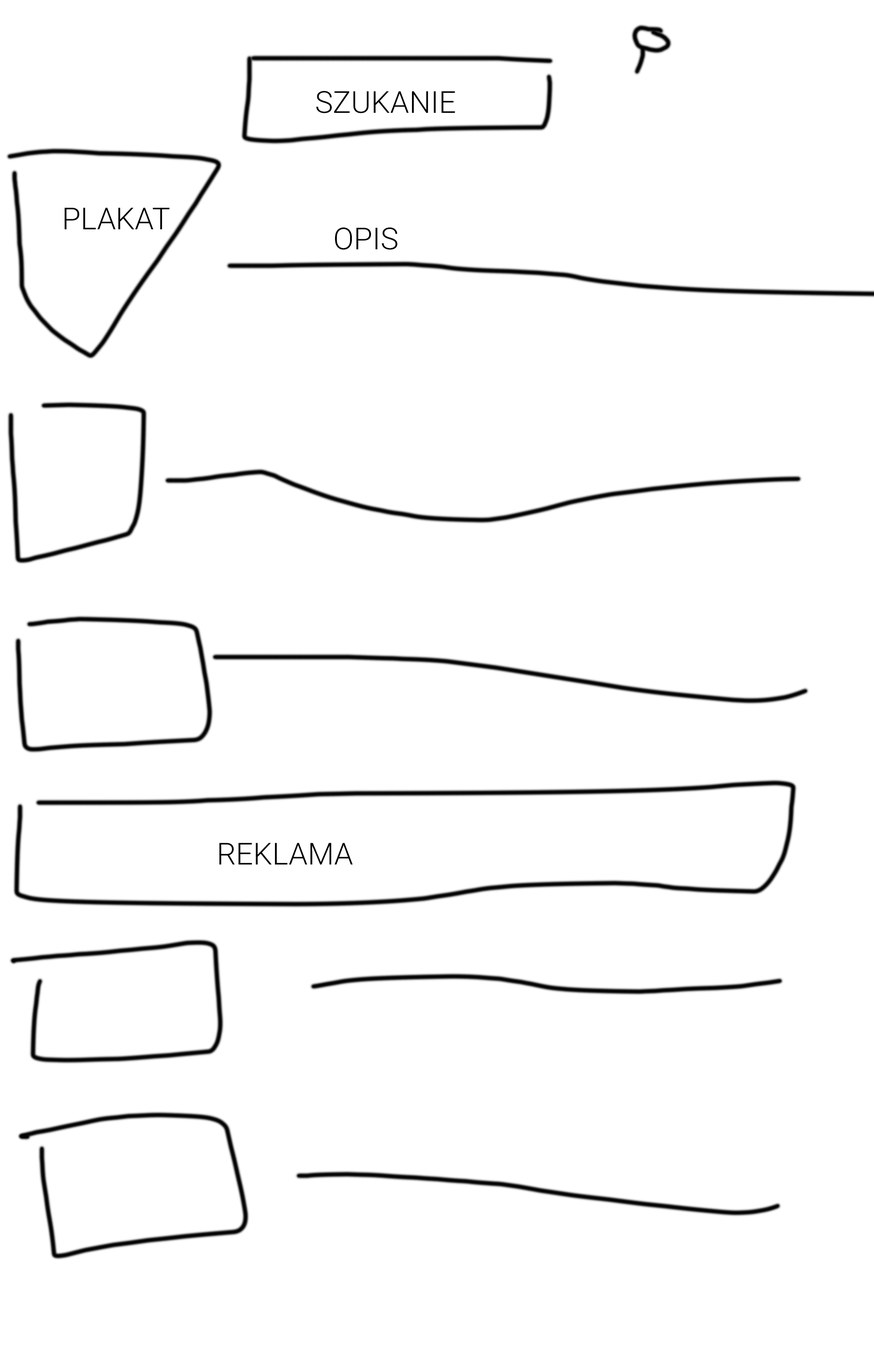
<style>
.page{position:relative;width:874px;height:1365px;background:#ffffff}
.page>*{position:absolute;margin:0}
.t1{font:30.3px "Roboto-Light";color:#000000}
</style>
<div class="page">
<p class="t1" style="left:316px;top:91px;width:139px;height:22px">SZUKANIE</p>
<p class="t1" style="left:65px;top:207px;width:105px;height:22px">PLAKAT</p>
<p class="t1" style="left:335px;top:227px;width:62px;height:23px">OPIS</p>
<p class="t1" style="left:219px;top:843px;width:134px;height:21px">REKLAMA</p>
</div>
